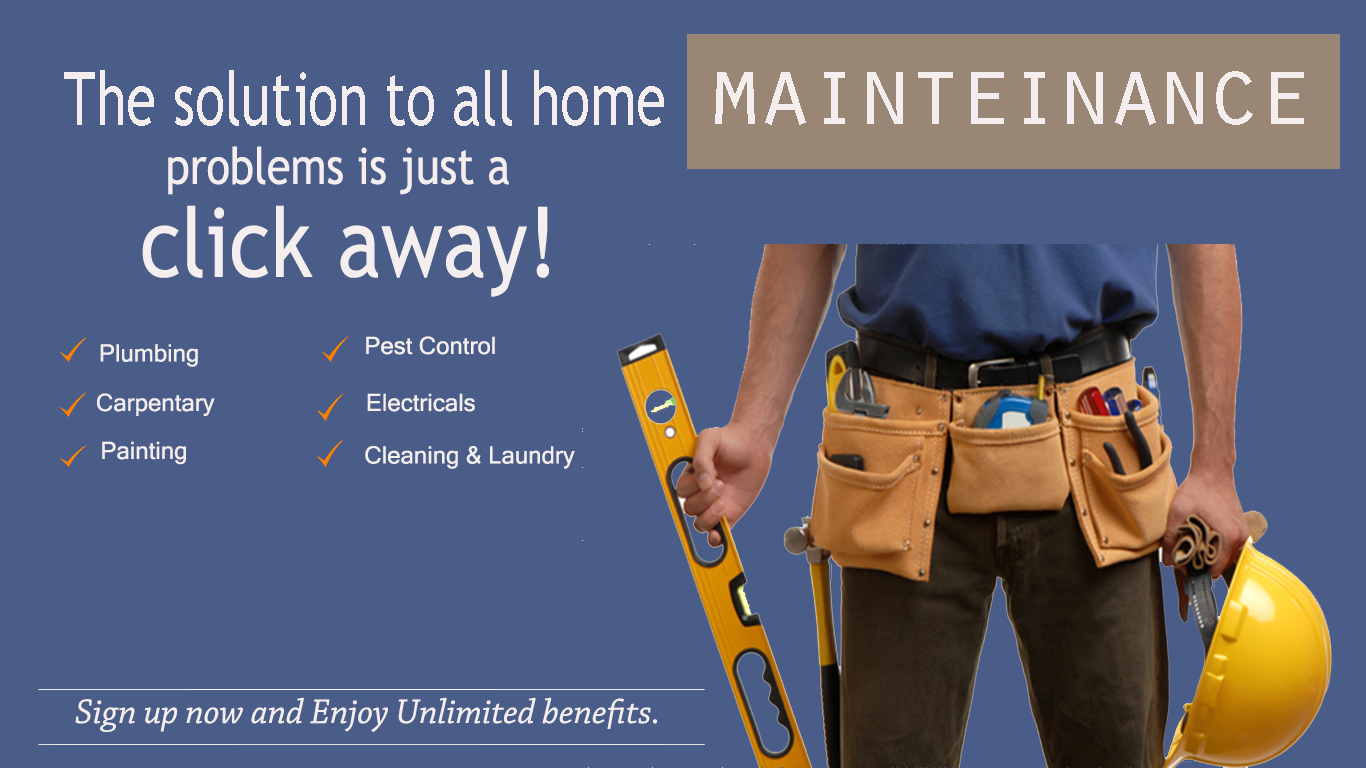
<style>
.page{position:relative;width:1366px;height:768px;background:#4a5d89}
.page>*{position:absolute;margin:0}
.t1{font:73.7px "TrebuchetMS";color:#f4eeee;scale:0.75 1}
.t2{font:100px "OratorStd";letter-spacing:-0.1em;color:#f4eeee}
.t3{font:50.4px "TrebuchetMS";color:#f4eeee;scale:0.86 1}
.t4{font:96.2px "TrebuchetMS";color:#f4eeee;scale:0.86 1}
.t5{font:24px "MicrosoftSansSerif";color:#f4eeee}
.t6{font:36px "ChaparralPro-Italic";color:#f4eeee}
</style>
<div class="page">
<p class="t1" style="left:64px;top:70px;width:600px;height:56px">The solution to all home</p>
<p class="t2" style="left:715px;top:71px;width:589px;height:54px">mainteinance</p>
<p class="t3" style="left:168px;top:146px;width:341px;height:49px">problems is just a</p>
<p class="t4" style="left:142px;top:205px;width:407px;height:92px">click away!</p>
<p class="t5" style="left:366px;top:336px;width:129px;height:19px">Pest Control</p>
<p class="t5" style="left:100px;top:344px;width:98px;height:23px">Plumbing</p>
<p class="t5" style="left:97px;top:393px;width:118px;height:24px">Carpentary</p>
<p class="t5" style="left:367px;top:393px;width:108px;height:19px">Electricals</p>
<p class="t5" style="left:102px;top:441px;width:84px;height:24px">Painting</p>
<p class="t5" style="left:365px;top:446px;width:210px;height:23px">Cleaning &amp; Laundry</p>
<p class="t6" style="left:75px;top:697px;width:582px;height:35px">Sign up now and Enjoy Unlimited benefits.</p>
</div>
